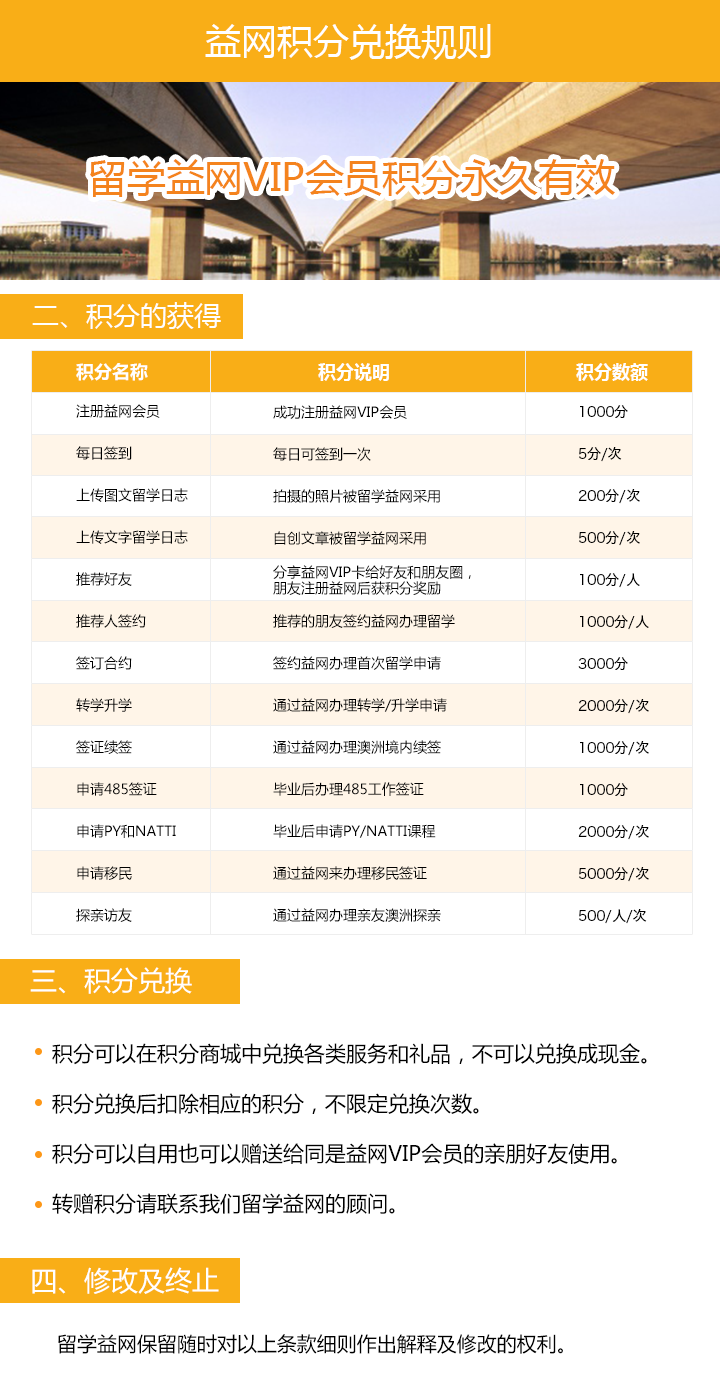
<style>
.page{position:relative;width:720px;height:1394px;background:#ffffff}
.page>*{position:absolute;margin:0}
.t1{font:36px "MicrosoftYaHei";color:#ffffff}
.t2{font:38.5px "MicrosoftYaHei";color:#f4831d}
.t3{font:27px "MicrosoftYaHei";color:#ffffff}
.t4{font:18px "MicrosoftYaHei-Bold";color:#ffffff}
.t5{font:14px/42px "MicrosoftYaHei";color:#000000}
.t6{font:14px/42px "HiraginoSansGB-W3";color:#000000}
.t7{font:14px/16px "MicrosoftYaHei";color:#000000}
.t8{font:21px/50px "MicrosoftYaHei";color:#000000}
.t9{font:20px "MicrosoftYaHei";color:#000000}
</style>
<div class="page">
<p class="t1" style="left:205px;top:24px;width:286px;height:36px">益网积分兑换规则</p>
<p class="t2" style="left:90px;top:159px;width:525px;height:38px">留学益网VIP会员积分永久有效</p>
<p class="t3" style="left:32px;top:302px;width:189px;height:27px">二、积分的获得</p>
<p class="t4" style="left:76px;top:363px;width:72px;height:18px">积分名称</p>
<p class="t4" style="left:318px;top:363px;width:71px;height:18px">积分说明</p>
<p class="t4" style="left:576px;top:363px;width:72px;height:18px">积分数额</p>
<p class="t5" style="left:76px;top:404px;width:112px;height:518px">注册益网会员<br>每日签到<br>上传图文留学日志<br>上传文字留学日志<br>推荐好友<br>推荐人签约<br>签订合约<br>转学升学<br>签证续签<br>申请485签证<br>申请PY和NATTI<br>申请移民<br>探亲访友</p>
<p class="t5" style="left:273px;top:405px;width:167px;height:140px">成功注册益网VIP会员<br>每日可签到一次<br>拍摄的照片被留学益网采用<br>自创文章被留学益网采用</p>
<p class="t6" style="left:578px;top:405px;width:71px;height:519px">1000分<br>5分/次<br>200分/次<br>500分/次<br>100分/人<br>1000分/人<br>3000分<br>2000分/次<br>1000分/次<br>1000分<br>2000分/次<br>5000分/次<br>500/人/次</p>
<p class="t5" style="left:273px;top:565px;width:198px;height:30px">分享益网VIP卡给好友和朋友圈，<br><span class="t7">朋友注册益网后获积分奖励</span></p>
<p class="t5" style="left:273px;top:614px;width:182px;height:308px">推荐的朋友签约益网办理留学<br>签约益网办理首次留学申请<br>通过益网办理转学/升学申请<br>通过益网办理澳洲境内续签<br>毕业后办理485工作签证<br>毕业后申请PY/NATTI课程<br>通过益网来办理移民签证<br>通过益网办理亲友澳洲探亲</p>
<p class="t3" style="left:30px;top:967px;width:162px;height:27px">三、积分兑换</p>
<p class="t8" style="left:52px;top:1043px;width:595px;height:172px">积分可以在积分商城中兑换各类服务和礼品，不可以兑换成现金。<br>积分兑换后扣除相应的积分，不限定兑换次数。<br>积分可以自用也可以赠送给同是益网VIP会员的亲朋好友使用。<br>转赠积分请联系我们留学益网的顾问。</p>
<p class="t3" style="left:32px;top:1267px;width:187px;height:27px">四、修改及终止</p>
<p class="t9" style="left:58px;top:1334px;width:505px;height:20px">留学益网保留随时对以上条款细则作出解释及修改的权利。</p>
</div>
